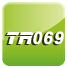
<style>
.page{position:relative;width:68px;height:68px;background:#ffffff}
.page>*{position:absolute;margin:0}
.t1{font:17.6px "242-CAI978";letter-spacing:0.05em;color:#ffffff}
.t2{font:16.9px "Arial-BoldMT";letter-spacing:0.05em;color:#ffffff;font-weight:bold;font-style:italic}
</style>
<div class="page">
<p class="t1" style="left:6px;top:32px;width:28px;height:12px">TR</p>
<p class="t2" style="left:33px;top:31px;width:31px;height:14px">069</p>
</div>
